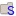
<style>
.page{position:relative;width:16px;height:16px;background:#ffffff}
.page>*{position:absolute;margin:0}
.t1{font:12px "NewsGothicMT";color:#1b17ed}
</style>
<div class="page">
<p class="t1" style="left:7px;top:6px;width:8px;height:9px">S</p>
</div>
